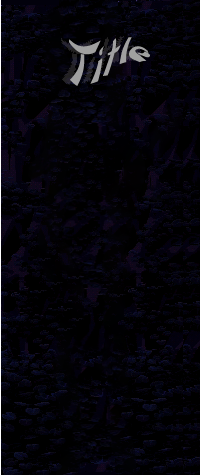
<style>
.page{position:relative;width:200px;height:475px;background:#000000}
.page>*{position:absolute;margin:0}
.t1{font:50.5px "DomoAregatoItalic";color:#a0a0a0}
</style>
<div class="page">
<p class="t1" style="left:69px;top:37px;width:81px;height:49px">Title</p>
</div>
